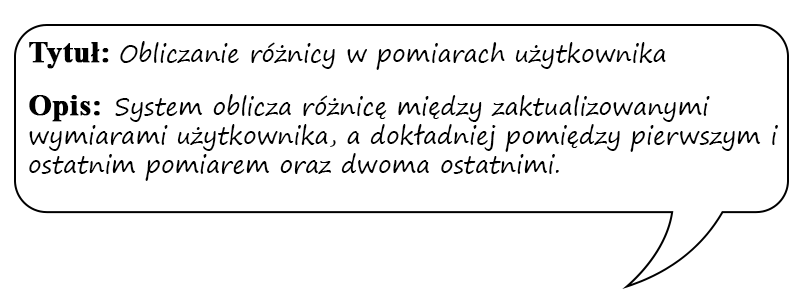
<style>
.page{position:relative;width:800px;height:307px;background:#ffffff}
.page>*{position:absolute;margin:0}
.t1{font:24px "SegoePrint";color:#000000}
.t2{font:30px "TimesNewRomanPS-BoldMT";color:#000000;font-weight:bold}
</style>
<div class="page">
<p class="t1" style="left:29px;top:41px;width:749px;height:140px"><span class="t2">Tytuł: </span>Obliczanie różnicy w pomiarach użytkownika<br><br><span class="t2">Opis:  </span>System oblicza różnicę między zaktualizowanymi wymiarami użytkownika, a dokładniej pomiędzy pierwszym i ostatnim pomiarem oraz dwoma ostatnimi.</p>
</div>
